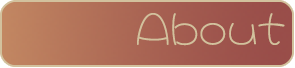
<style>
.page{position:relative;width:295px;height:68px}
.page>*{position:absolute;margin:0}
.t1{font:40.8px "DFYuanYuan-W2-HKP-BF";color:#d2c19d;font-weight:bold}
</style>
<div class="page">
<p class="t1" style="left:137px;top:13px;width:148px;height:33px">About</p>
</div>
